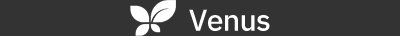
<style>
.page{position:relative;width:400px;height:36px;background:#333333}
.page>*{position:absolute;margin:0}
.t1{font:30px "IBMPlexSans-Medium";letter-spacing:-0.025em;color:#ffffff}
</style>
<div class="page">
<p class="t1" style="left:189px;top:9px;width:81px;height:22px">Venus</p>
</div>
